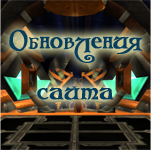
<style>
.page{position:relative;width:151px;height:150px}
.page>*{position:absolute;margin:0}
.t1{font:26px/17px "AzerothCyrillic";color:#063d5c;font-weight:bold}
.t2{font:19px/17px "AzerothCyrillic";color:#063d5c;font-weight:bold}
</style>
<div class="page">
<p class="t1" style="left:9px;top:29px;width:134px;height:71px;text-align:center"><span class="t2"><br><br></span>Обновления <br><br><br>сайта</p>
</div>
